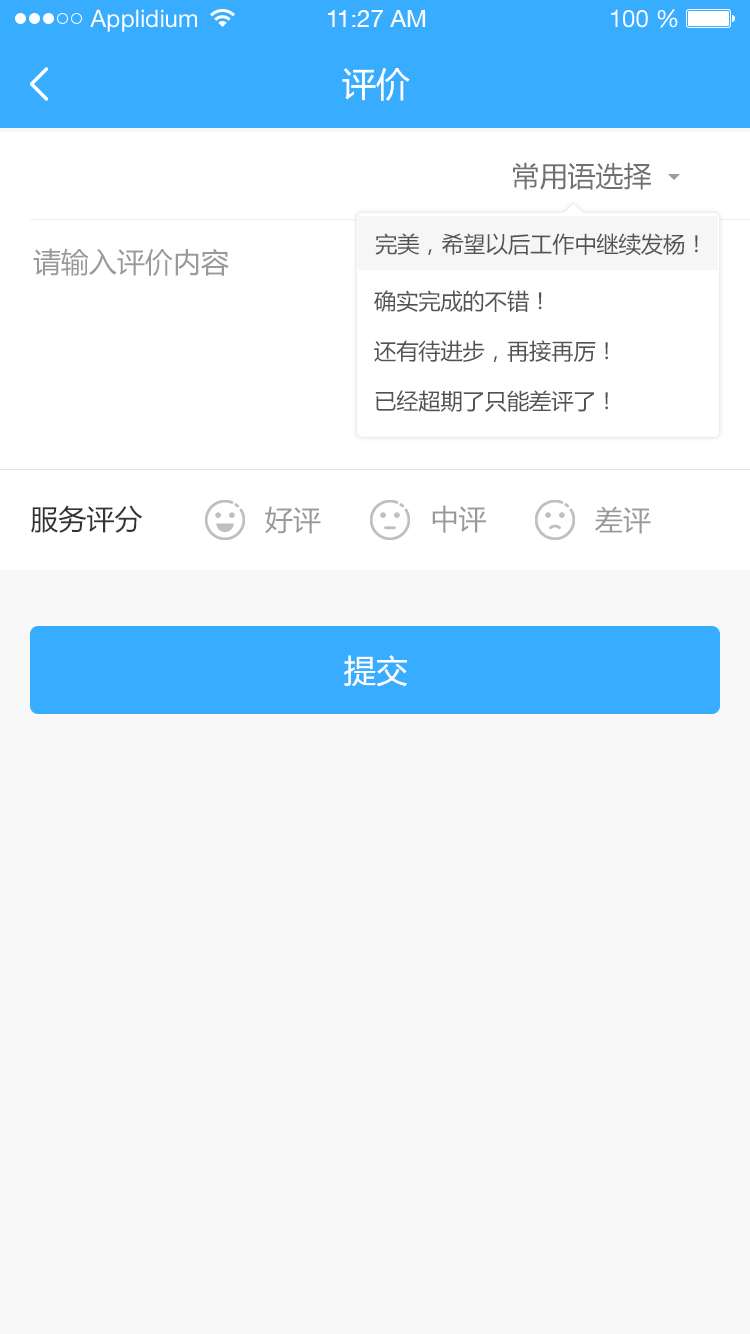
<style>
.page{position:relative;width:750px;height:1334px;background:#f8f8f8}
.page>*{position:absolute;margin:0}
.t1{font:24px "HelveticaNeueLTStd-Roman";color:#ffffff}
.t2{font:24px "HelveticaNeueCE-Roman";color:#ffffff}
.t3{font:34px "MicrosoftYaHei";color:#ffffff}
.t4{font:28px "MicrosoftYaHei";color:#707070}
.t5{font:22.2px "MicrosoftYaHei";color:#535353;text-transform:uppercase}
.t6{font:28px "MicrosoftYaHei";color:#999999}
.t7{font:28px "MicrosoftYaHei";color:#333333}
.t8{font:32px "MicrosoftYaHei";color:#ffffff}
</style>
<div class="page">
<p class="t1" style="left:90px;top:9px;width:107px;height:23px">Applidium</p>
<p class="t2" style="left:328px;top:10px;width:98px;height:17px">11:27 AM</p>
<p class="t1" style="left:611px;top:9px;width:67px;height:19px">100 %</p>
<p class="t3" style="left:342px;top:68px;width:68px;height:33px">评价</p>
<p class="t4" style="left:513px;top:162px;width:138px;height:28px">常用语选择</p>
<p class="t5" style="left:375px;top:233px;width:323px;height:23px">完美，希望以后工作中继续发杨！</p>
<p class="t6" style="left:33px;top:248px;width:196px;height:28px">请输入评价内容</p>
<p class="t5" style="left:374px;top:290px;width:168px;height:22px">确实完成的不错！</p>
<p class="t5" style="left:374px;top:340px;width:234px;height:22px">还有待进步，再接再厉！</p>
<p class="t5" style="left:375px;top:390px;width:233px;height:22px">已经超期了只能差评了！</p>
<p class="t7" style="left:31px;top:505px;width:112px;height:28px">服务评分</p>
<p class="t6" style="left:265px;top:506px;width:56px;height:28px">好评</p>
<p class="t6" style="left:432px;top:505px;width:54px;height:28px">中评</p>
<p class="t6" style="left:595px;top:506px;width:56px;height:28px">差评</p>
<p class="t8" style="left:344px;top:655px;width:63px;height:32px">提交</p>
</div>
